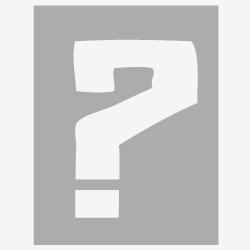
<style>
.page{position:relative;width:250px;height:250px;background:#adacac}
.page>*{position:absolute;margin:0}
.t1{font:289.5px "AnonymousClippings";color:#adacac;scale:1.4 1}
</style>
<div class="page">
<p class="t1" style="left:33px;top:5px;width:186px;height:240px">?</p>
</div>
